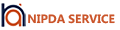
<style>
.page{position:relative;width:120px;height:30px;background:#ffffff}
.page>*{position:absolute;margin:0}
.t1{font:11.9px "MyanmarText-Bold";color:#ca5429}
</style>
<div class="page">
<p class="t1" style="left:28px;top:14px;width:87px;height:10px">NIPDA SERVICE</p>
</div>
